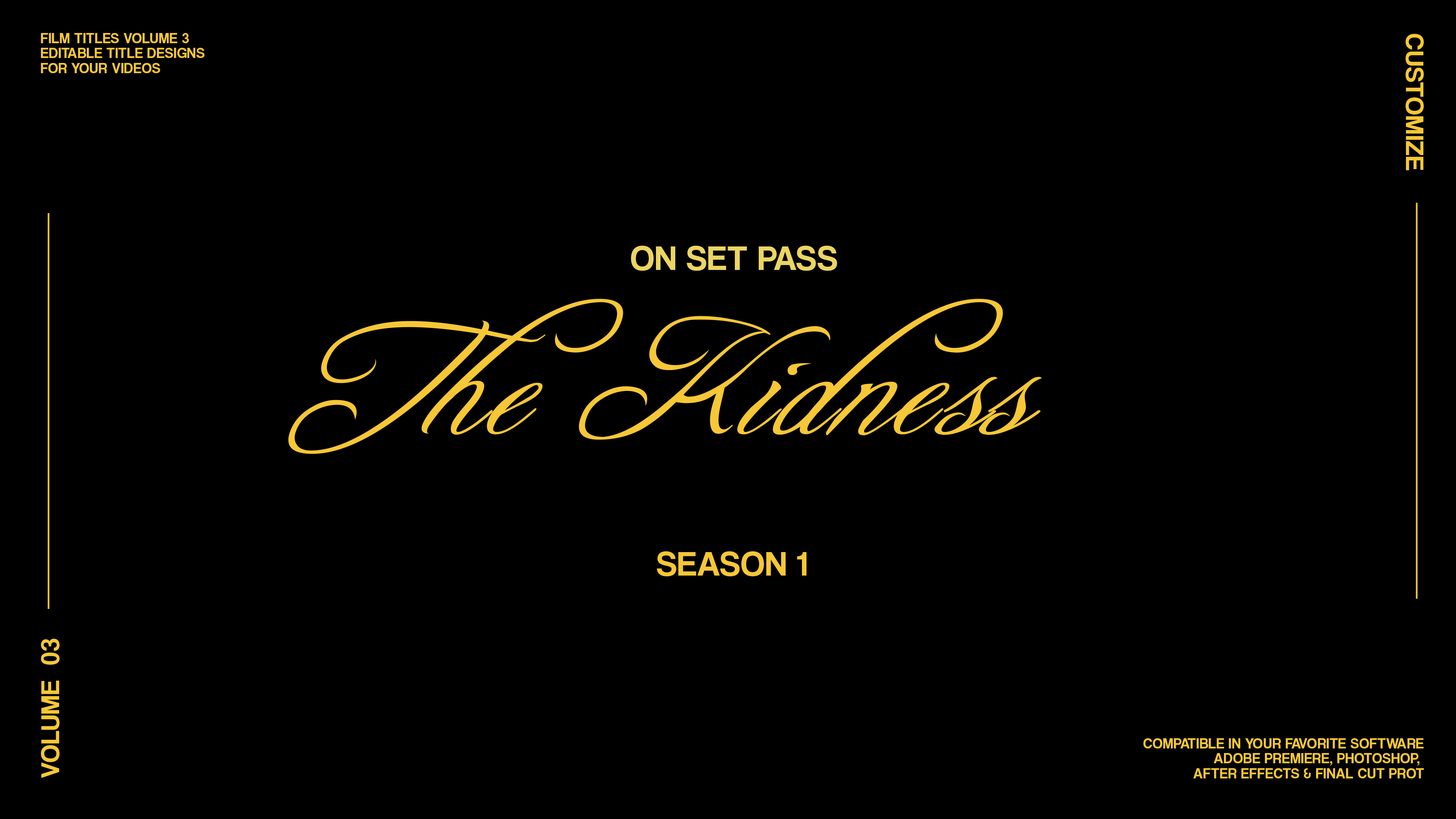
<style>
.page{position:relative;width:1456px;height:819px;background:#000000}
.page>*{position:absolute;margin:0}
.t1{font:14.8px/14.9px "CoolveticaRg-Regular";letter-spacing:0.03em;color:#f6c736}
.t2{font:26.5px "CoolveticaRg-Regular";letter-spacing:0.03em;color:#f6c736}
.t3{font:35.3px "CoolveticaRg-Regular";letter-spacing:0.03em;color:#ebd563}
.t4{font:158px "FreebooterScript";letter-spacing:0.03em;color:#f6c736;font-style:italic;scale:0.96 1}
.t5{font:35.3px "CoolveticaRg-Regular";letter-spacing:0.03em;color:#f6c736}
.t6{font:26.8px "CoolveticaRg-Regular";letter-spacing:0.03em;color:#f6c736}
</style>
<div class="page">
<p class="t1" style="left:41px;top:33px;width:164px;height:40px">FILM TITLES VOLUME 3<br>EDITABLE TITLE DESIGNS<br>FOR YOUR VIDEOS</p>
<p class="t2" style="left:1406px;top:34px;width:18px;height:136px;rotate:90deg">CUSTOMIZE</p>
<p class="t3" style="left:631px;top:246px;width:206px;height:25px">ON SET PASS</p>
<p class="t4" style="left:288px;top:299px;width:754px;height:155px">The Kidness</p>
<p class="t5" style="left:657px;top:551px;width:149px;height:25px">SEASON 1</p>
<p class="t6" style="left:41px;top:639px;width:19px;height:139px;rotate:-90deg">VOLUME  03</p>
</div>
